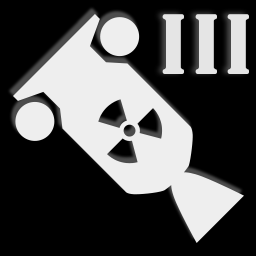
<style>
.page{position:relative;width:256px;height:256px;background:#000000}
.page>*{position:absolute;margin:0}
.t1{font:80px "StencilStd";letter-spacing:0.1em;color:#e5e5e5;scale:0.75 1}
</style>
<div class="page">
<p class="t1" style="left:162px;top:14px;width:87px;height:60px">III</p>
</div>
